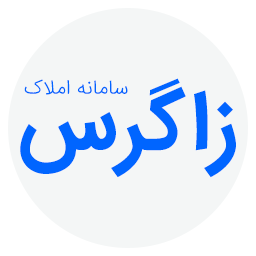
<style>
.page{position:relative;width:256px;height:256px;background:#f4f6f6}
.page>*{position:absolute;margin:0}
.t1{font:83.3px "IRANSansFaNum-Bold";color:#0065ff}
.t2{font:20.8px "IRANSansFaNum-Light";color:#0065ff}
</style>
<div class="page">
<p class="t1" style="left:20px;top:78px;width:216px;height:100px">زاگرس</p>
<p class="t2" style="left:24px;top:79px;width:104px;height:16px">سامانه املاک</p>
</div>
